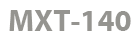
<style>
.page{position:relative;width:140px;height:40px;background:#ffffff}
.page>*{position:absolute;margin:0}
.t1{font:30px "Myriad-BdWeb";color:#959490}
</style>
<div class="page">
<p class="t1" style="left:9px;top:10px;width:122px;height:21px">MXT-140</p>
</div>
